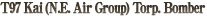
<style>
.page{position:relative;width:207px;height:16px;background:#ffffff}
.page>*{position:absolute;margin:0}
.t1{font:15px "RyuminPro-ExBold";letter-spacing:-0.08em;color:#4a3f32;font-weight:bold;scale:0.79 1}
</style>
<div class="page">
<p class="t1" style="left:0px;top:1px;width:206px;height:15px">T97 Kai (N.E. Air Group) Torp. Bomber</p>
</div>
